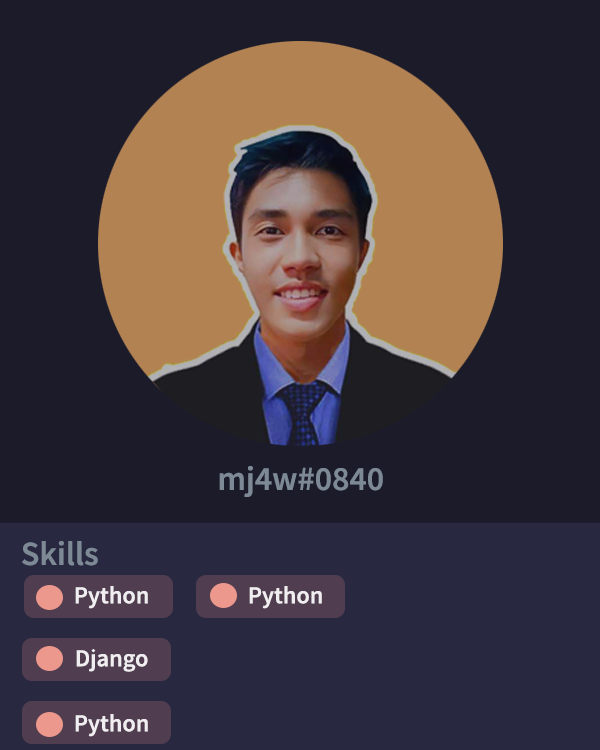
<style>
.page{position:relative;width:600px;height:750px;background:#1c1b29}
.page>*{position:absolute;margin:0}
.t1{font:33.8px "SourceSansRoman-Semibold";color:#7d8a96}
.t2{font:24.3px "SourceSansRoman-Semibold";color:#f0eef0}
</style>
<div class="page">
<p class="t1" style="left:219px;top:466px;width:164px;height:31px">mj4w#0840</p>
<p class="t1" style="left:22px;top:541px;width:76px;height:25px">Skills</p>
<p class="t2" style="left:75px;top:586px;width:73px;height:23px">Python</p>
<p class="t2" style="left:249px;top:586px;width:73px;height:23px">Python</p>
<p class="t2" style="left:76px;top:649px;width:72px;height:23px">Django</p>
<p class="t2" style="left:75px;top:714px;width:73px;height:23px">Python</p>
</div>
